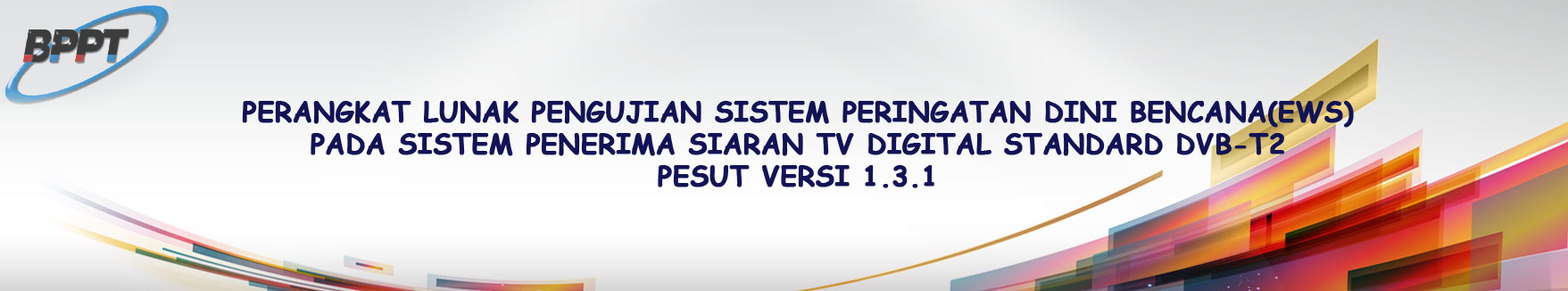
<style>
.page{position:relative;width:1568px;height:291px}
.page>*{position:absolute;margin:0}
.t1{font:26.8px "ComicSansMS-Bold";color:#121356;font-weight:bold}
</style>
<div class="page">
<p class="t1" style="left:242px;top:101px;width:1112px;height:87px;text-align:center">PERANGKAT LUNAK PENGUJIAN SISTEM PERINGATAN DINI BENCANA(EWS)<br>PADA SISTEM PENERIMA SIARAN TV DIGITAL STANDARD DVB-T2<br>PESUT VERSI 1.3.1</p>
</div>
